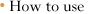
<style>
.page{position:relative;width:90px;height:14px;background:#ffffff}
.page>*{position:absolute;margin:0}
.t1{font:18px "Perpetua";color:#000000}
.t2{font:18px "Perpetua";color:#d99c3c}
</style>
<div class="page">
<p class="t1" style="left:0px;top:0px;width:84px;height:12px"><span class="t2">•</span> How to use</p>
</div>
